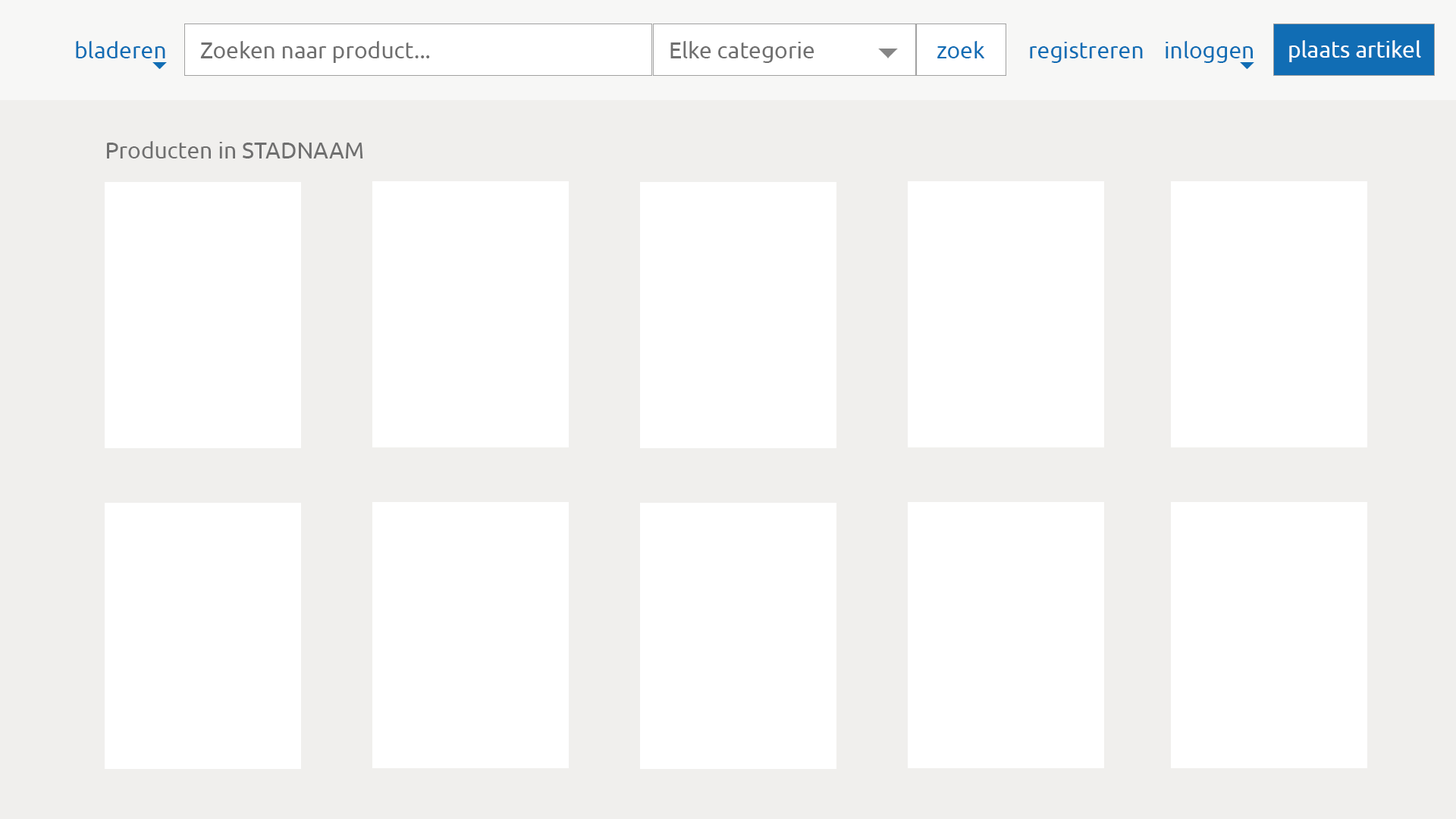
<style>
.page{position:relative;width:1456px;height:819px;background:#ffffff}
.page>*{position:absolute;margin:0}
.t1{font:22.7px "Ubuntu-Regular";color:#116db4}
.t2{font:22.7px "Ubuntu-Regular";color:#6f6f6f}
.t3{font:22.7px "Ubuntu-Regular";color:#ffffff}
</style>
<div class="page">
<p class="t1" style="left:76px;top:41px;width:89px;height:17px">bladeren</p>
<p class="t2" style="left:200px;top:41px;width:230px;height:22px">Zoeken naar product...</p>
<p class="t2" style="left:670px;top:41px;width:144px;height:22px">Elke categorie</p>
<p class="t1" style="left:937px;top:41px;width:48px;height:17px">zoek</p>
<p class="t1" style="left:1030px;top:42px;width:113px;height:21px">registreren</p>
<p class="t1" style="left:1166px;top:41px;width:87px;height:22px">inloggen</p>
<p class="t3" style="left:1289px;top:40px;width:132px;height:22px">plaats artikel</p>
<p class="t2" style="left:107px;top:141px;width:256px;height:17px">Producten in STADNAAM</p>
</div>
